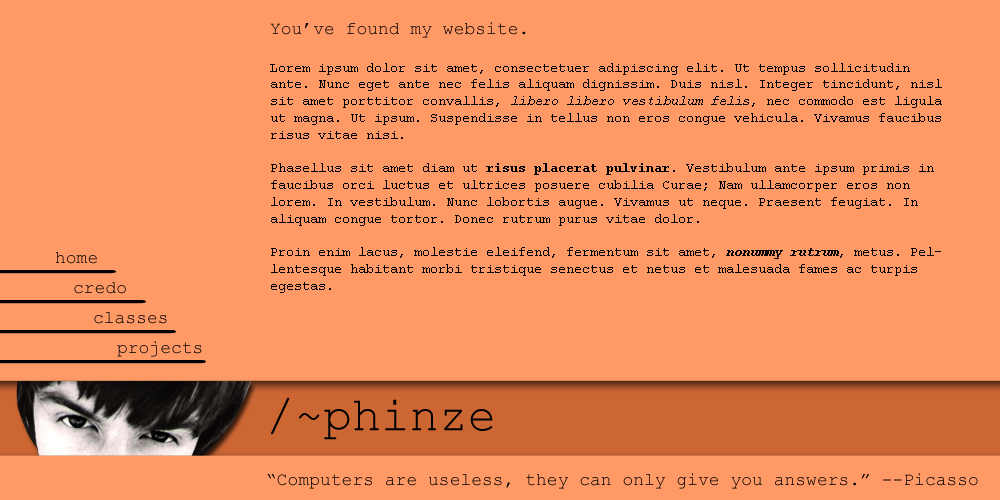
<style>
.page{position:relative;width:1000px;height:500px;background:#ff9966}
.page>*{position:absolute;margin:0}
.t1{font:18px "CourierNewPSMT";color:#000000}
.t2{font:14px "CourierNewPSMT";color:#000000}
.t3{font:14px "CourierNewPS-ItalicMT";color:#000000}
.t4{font:14px "CourierNewPS-BoldMT";color:#000000}
.t5{font:14px "CourierNewPS-BoldItalicMT";color:#000000}
.t6{font:18px "CourierNewPSMT"}
.t7{font:48px "CourierNewPSMT";color:#000000}
</style>
<div class="page">
<p class="t1" style="left:270px;top:22px;width:256px;height:16px">You’ve found my website.</p>
<p class="t2" style="left:270px;top:63px;width:672px;height:230px">Lorem ipsum dolor sit amet, consectetuer adipiscing elit. Ut tempus sollicitudin ante. Nunc eget ante nec felis aliquam dignissim. Duis nisl. Integer tincidunt, nisl sit amet porttitor convallis, <span class="t3">libero libero vestibulum felis</span>, nec commodo est ligula ut magna. Ut ipsum. Suspendisse in tellus non eros congue vehicula. Vivamus faucibus risus vitae nisi.<br><br>Phasellus sit amet diam ut <span class="t4">risus placerat pulvinar</span>. Vestibulum ante ipsum primis in faucibus orci luctus et ultrices posuere cubilia Curae; Nam ullamcorper eros non lorem. In vestibulum. Nunc lobortis augue. Vivamus ut neque. Praesent feugiat. In aliquam congue tortor. Donec rutrum purus vitae dolor.<br><br>Proin enim lacus, molestie eleifend, fermentum sit amet, <span class="t5">nonummy rutrum</span>, metus. Pellentesque habitant morbi tristique senectus et netus et malesuada fames ac turpis egestas.</p>
<p class="t1" style="left:56px;top:252px;width:41px;height:12px">home</p>
<p class="t6" style="left:74px;top:282px;width:52px;height:12px">credo</p>
<p class="t6" style="left:94px;top:312px;width:73px;height:12px">classes</p>
<p class="t6" style="left:117px;top:341px;width:85px;height:16px">projects</p>
<p class="t7" style="left:271px;top:397px;width:222px;height:43px">/~phinze</p>
<p class="t1" style="left:267px;top:473px;width:711px;height:16px">“Computers are useless, they can only give you answers.” --Picasso</p>
</div>
